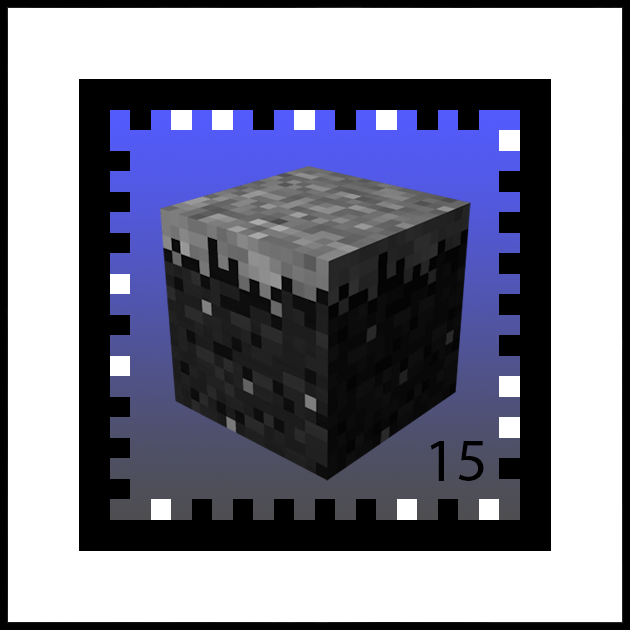
<style>
.page{position:relative;width:630px;height:630px;background:#ffffff}
.page>*{position:absolute;margin:0}
.t1{font:61.1px "MyriadPro-Regular";color:#000000;font-variant:small-caps}
</style>
<div class="page">
<p class="t1" style="left:430px;top:441px;width:54px;height:40px">15</p>
</div>
